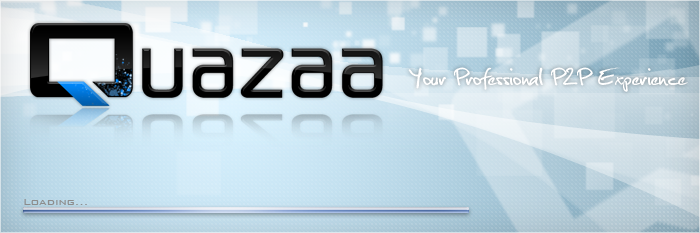
<style>
.page{position:relative;width:700px;height:233px}
.page>*{position:absolute;margin:0}
.t1{font:32.2px "Christopherhand";color:#ffffff}
.t2{font:12px "BankGothicBT-Light";color:#8e8e8e}
</style>
<div class="page">
<p class="t1" style="left:408px;top:67px;width:280px;height:25px">Your Professional P2P Experience</p>
<p class="t2" style="left:24px;top:199px;width:63px;height:6px">Loading...</p>
</div>
